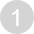
<style>
.page{position:relative;width:34px;height:34px;background:#d4d4d4}
.page>*{position:absolute;margin:0}
.t1{font:24px "ArialMT";color:#ffffff}
</style>
<div class="page">
<p class="t1" style="left:12px;top:9px;width:7px;height:17px">1</p>
</div>
